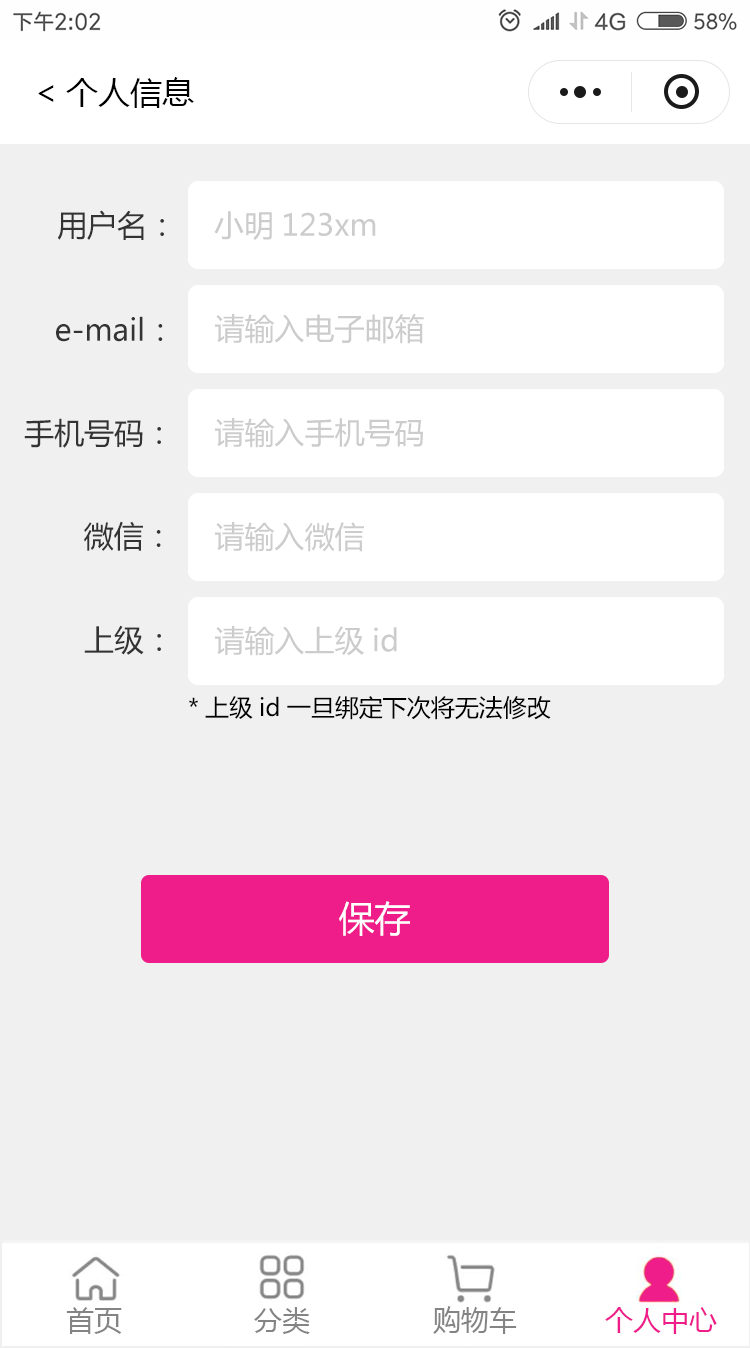
<style>
.page{position:relative;width:750px;height:1348px;background:#f0f0f0}
.page>*{position:absolute;margin:0}
.t1{font:32px "MicrosoftYaHei";color:#000000}
.t2{font:30px "MicrosoftYaHei";color:#333333}
.t3{font:30px "MicrosoftYaHei";color:#cccccc}
.t4{font:24px "MicrosoftYaHei";color:#000000}
.t5{font:36px "MicrosoftYaHei";color:#ffffff}
</style>
<div class="page">
<p class="t1" style="left:38px;top:77px;width:156px;height:31px">&lt;个人信息</p>
<p class="t2" style="left:57px;top:210px;width:107px;height:30px">用户名：</p>
<p class="t3" style="left:214px;top:211px;width:162px;height:29px">小明123xm</p>
<p class="t2" style="left:56px;top:316px;width:107px;height:26px">e-mail：</p>
<p class="t3" style="left:215px;top:314px;width:209px;height:30px">请输入电子邮箱</p>
<p class="t2" style="left:24px;top:418px;width:137px;height:30px">手机号码：</p>
<p class="t3" style="left:215px;top:418px;width:208px;height:30px">请输入手机号码</p>
<p class="t2" style="left:84px;top:521px;width:77px;height:30px">微信：</p>
<p class="t3" style="left:215px;top:522px;width:149px;height:30px">请输入微信</p>
<p class="t2" style="left:84px;top:625px;width:77px;height:30px">上级：</p>
<p class="t3" style="left:215px;top:626px;width:182px;height:30px">请输入上级id</p>
<p class="t4" style="left:189px;top:696px;width:362px;height:24px">*上级id一旦绑定下次将无法修改</p>
<p class="t5" style="left:339px;top:901px;width:71px;height:35px">保存</p>
</div>
